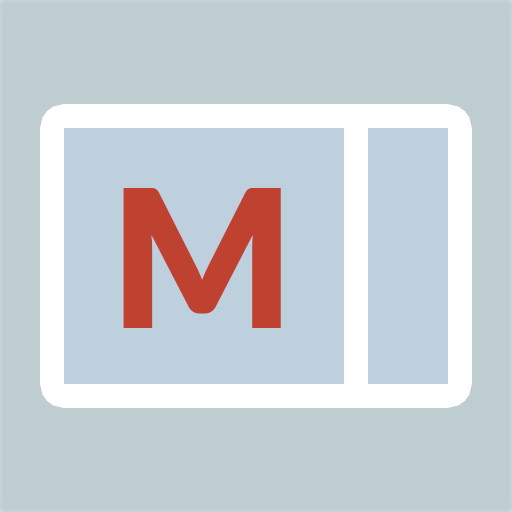
<style>
.page{position:relative;width:512px;height:512px;background:#becdd0}
.page>*{position:absolute;margin:0}
.t1{font:192px "Lato-Black";color:#bf4230}
</style>
<div class="page">
<p class="t1" style="left:123px;top:188px;width:158px;height:140px">M</p>
</div>
